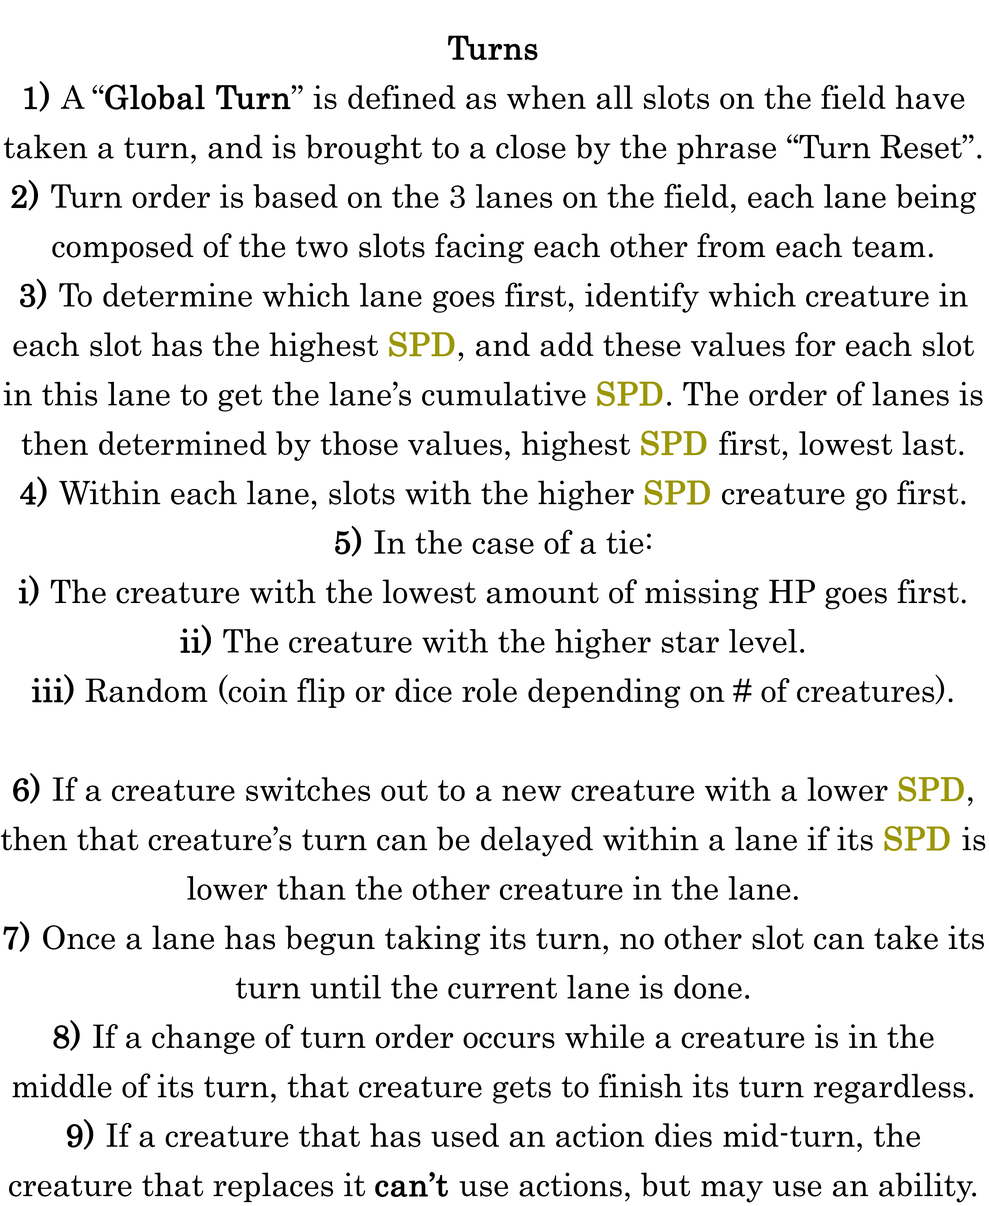
<style>
.page{position:relative;width:989px;height:1206px;background:#ffffff}
.page>*{position:absolute;margin:0}
.t1{font:54.9px/49.4px "Century";color:#000000}
.t2{font:54.9px/49.4px "Century";color:#000000;font-weight:bold}
.t3{font:54.9px/49.4px "Century";color:#9c9700;font-weight:bold}
</style>
<div class="page">
<p class="t1" style="left:1px;top:36px;width:984px;height:1167px;text-align:center"><span class="t2">Turns<br>1) </span>A “<span class="t2">Global Turn</span>” is defined as when all slots on the field have taken a turn, and is brought to a close by the phrase “Turn Reset”.<br><span class="t2">2) </span>Turn order is based on the 3 lanes on the field, each lane being composed of the two slots facing each other from each team.<br><span class="t2">3) </span>To determine which lane goes first, identify which creature in each slot has the highest <span class="t3">SPD</span>, and add these values for each slot in this lane to get the lane’s cumulative <span class="t3">SPD</span>. The order of lanes is then determined by those values, highest <span class="t3">SPD </span>first, lowest last.<br><span class="t2">4) </span>Within each lane, slots with the higher <span class="t3">SPD</span> creature go first.<br><span class="t2">5) </span>In the case of a tie:<br><span class="t2">i)</span> The creature with the lowest amount of missing HP goes first.<br><span class="t2">ii)</span> The creature with the higher star level.<br><span class="t2">iii)</span> Random (coin flip or dice role depending on # of creatures).<br><br><span class="t2">6) </span>If a creature switches out to a new creature with a lower <span class="t3">SPD</span>, then that creature’s turn can be delayed within a lane if its <span class="t3">SPD </span>is lower than the other creature in the lane.<br><span class="t2">7) </span>Once a lane has begun taking its turn, no other slot can take its turn until the current lane is done.<br><span class="t2">8) </span>If a change of turn order occurs while a creature is in the middle of its turn, that creature gets to finish its turn regardless.<br><span class="t2">9) </span>If a creature that has used an action dies mid-turn, the creature that replaces it <span class="t2">can’t </span>use actions, but may use an ability.</p>
</div>
